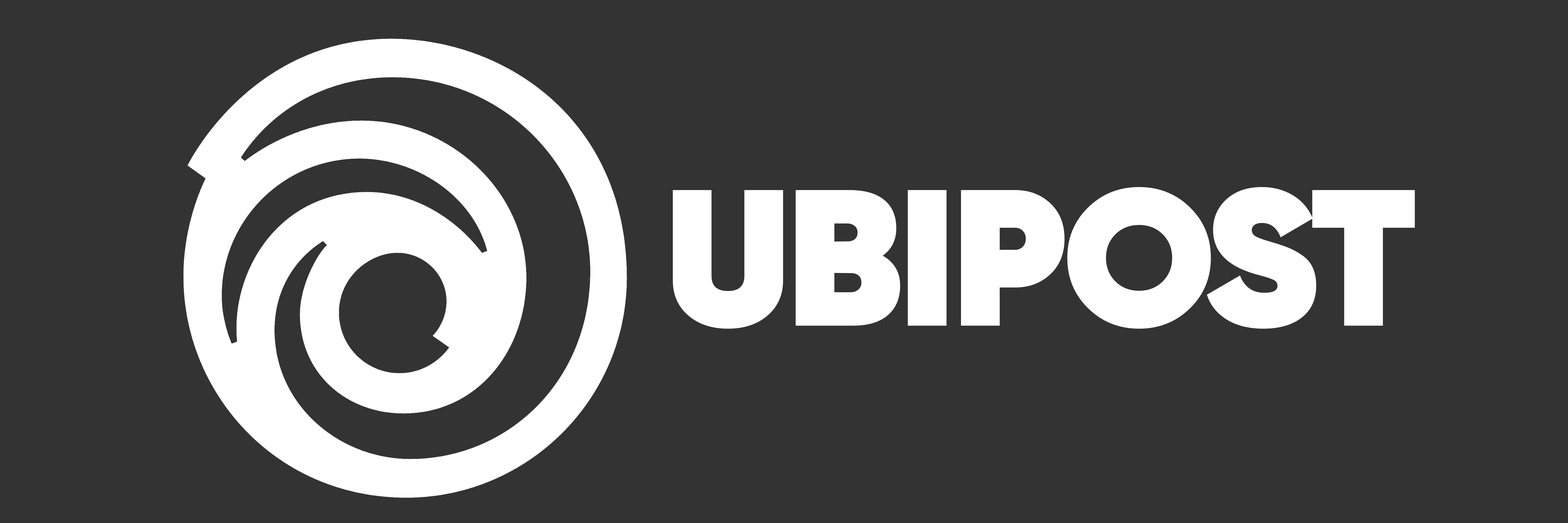
<style>
.page{position:relative;width:1568px;height:523px;background:#333333}
.page>*{position:absolute;margin:0}
.t1{font:193.4px "Gilroy-Heavy";letter-spacing:-0.025em;color:#ffffff}
</style>
<div class="page">
<p class="t1" style="left:673px;top:187px;width:742px;height:141px">UBIPOST</p>
</div>
